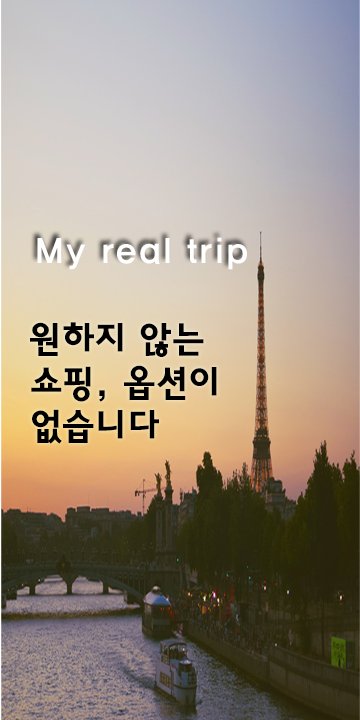
<style>
.page{position:relative;width:360px;height:720px}
.page>*{position:absolute;margin:0}
.t1{font:36px "HaanYGodic24";color:#ffffff}
.t2{font:36px "HaanYGodic25";color:#000000}
</style>
<div class="page">
<p class="t1" style="left:37px;top:237px;width:210px;height:33px">My real trip</p>
<p class="t2" style="left:30px;top:322px;width:187px;height:122px">원하지 않는<br>쇼핑, 옵션이 <br>없습니다</p>
</div>
